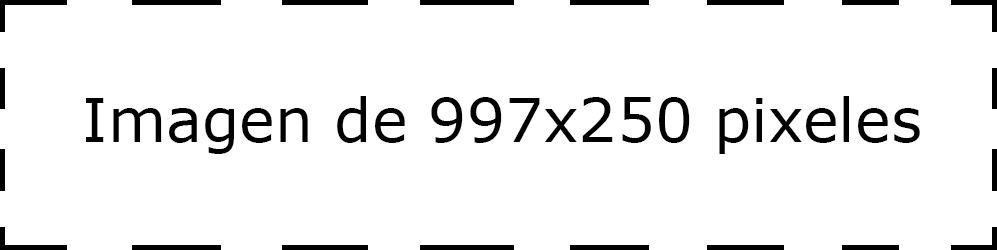
<style>
.page{position:relative;width:997px;height:250px;background:#ffffff}
.page>*{position:absolute;margin:0}
.t1{font:60px "Verdana";color:#000000}
</style>
<div class="page">
<p class="t1" style="left:86px;top:96px;width:834px;height:58px">Imagen de 997x250 pixeles</p>
</div>
